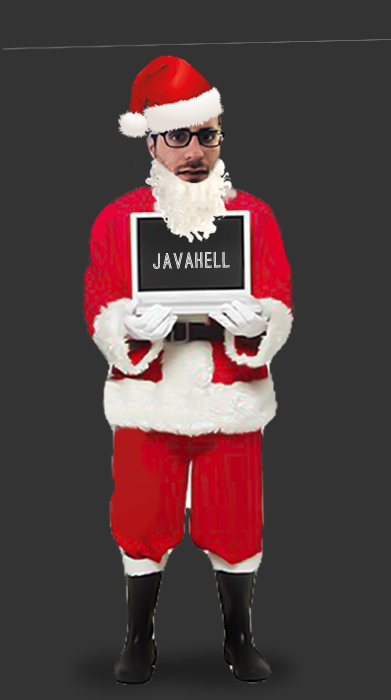
<style>
.page{position:relative;width:391px;height:700px;background:#333333}
.page>*{position:absolute;margin:0}
.t1{font:21.1px "OstrichSans-Bold";letter-spacing:0.05em;color:#fdfdfd}
</style>
<div class="page">
<p class="t1" style="left:153px;top:251px;width:77px;height:18px;rotate:-1deg">javaHELL</p>
</div>
